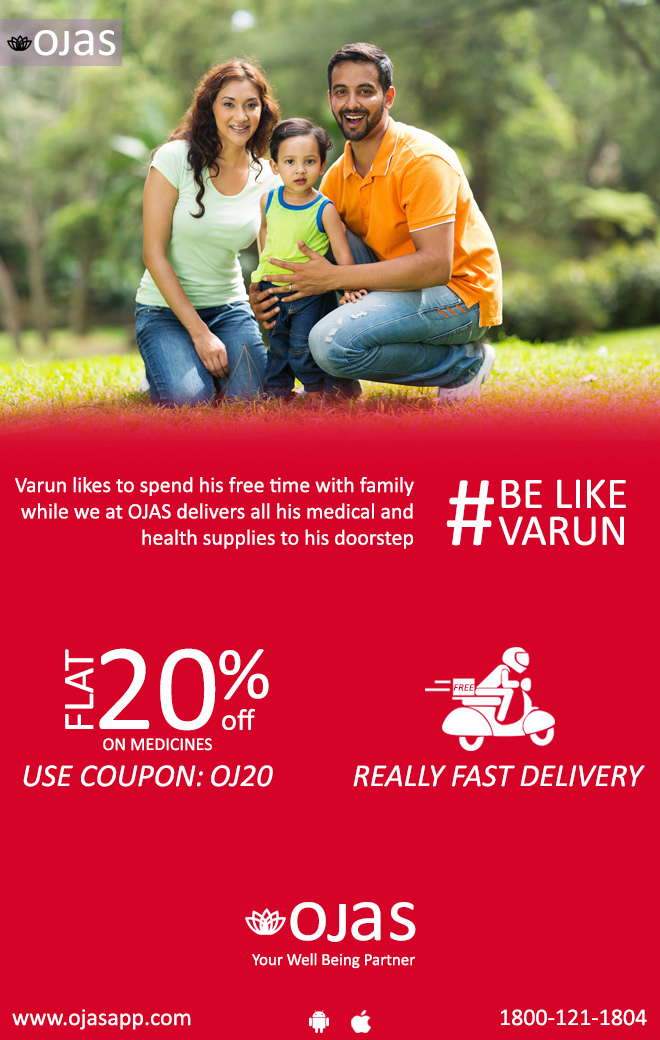
<style>
.page{position:relative;width:660px;height:1040px;background:#d50328}
.page>*{position:absolute;margin:0}
.t1{font:52.9px "Calibri";color:#ffffff}
.t2{font:21.9px "Calibri";color:#ffffff}
.t3{font:101.1px "Calibri";color:#ffffff}
.t4{font:44px "Calibri";color:#ffffff}
.t5{font:125px "Calibri";color:#ffffff}
.t6{font:74.8px "Calibri";color:#ffffff}
.t7{font:10.1px "Calibri-Italic";color:#d50328;scale:1.04 1}
.t8{font:30.3px "Calibri";color:#ffffff}
.t9{font:18px "Calibri";color:#ffffff}
.t10{font:32px "Calibri-Italic";color:#ffffff}
.t11{font:80px "Calibri";color:#ffffff}
.t12{font:17px "Calibri";color:#ffffff}
.t13{font:24px "Calibri";color:#ffffff}
</style>
<div class="page">
<p class="t1" style="left:34px;top:30px;width:24px;height:26px">o</p>
<p class="t1" style="left:74px;top:30px;width:42px;height:26px">as</p>
<p class="t2" style="left:15px;top:477px;width:399px;height:72px">Varun likes to spend his free time with family <br>while we at OJAS delivers all his medical and <br>health supplies to his doorstep</p>
<p class="t3" style="left:446px;top:480px;width:48px;height:66px">#</p>
<p class="t4" style="left:501px;top:479px;width:125px;height:30px">BE LIKE</p>
<p class="t4" style="left:498px;top:516px;width:126px;height:30px">VARUN</p>
<p class="t4" style="left:65px;top:649px;width:29px;height:80px;rotate:-90deg">FLAT</p>
<p class="t5" style="left:99px;top:648px;width:117px;height:83px">20</p>
<p class="t6" style="left:219px;top:649px;width:50px;height:51px">%</p>
<p class="t7" style="left:453px;top:684px;width:22px;height:7px">FREE</p>
<p class="t8" style="left:222px;top:708px;width:33px;height:22px">off</p>
<p class="t9" style="left:103px;top:738px;width:109px;height:13px">ON MEDICINES</p>
<p class="t10" style="left:23px;top:765px;width:180px;height:22px">:USE COUPON</p>
<p class="t10" style="left:211px;top:765px;width:62px;height:22px">OJ20</p>
<p class="t10" style="left:353px;top:765px;width:292px;height:22px">REALLY FAST DELIVERY</p>
<p class="t11" style="left:290px;top:902px;width:36px;height:39px">o</p>
<p class="t11" style="left:351px;top:902px;width:65px;height:39px">as</p>
<p class="t12" style="left:252px;top:953px;width:163px;height:16px">Your Well Being Partner</p>
<p class="t13" style="left:12px;top:1009px;width:179px;height:21px">www.ojasapp.com</p>
<p class="t13" style="left:501px;top:1009px;width:146px;height:17px">1800-121-1804</p>
</div>
